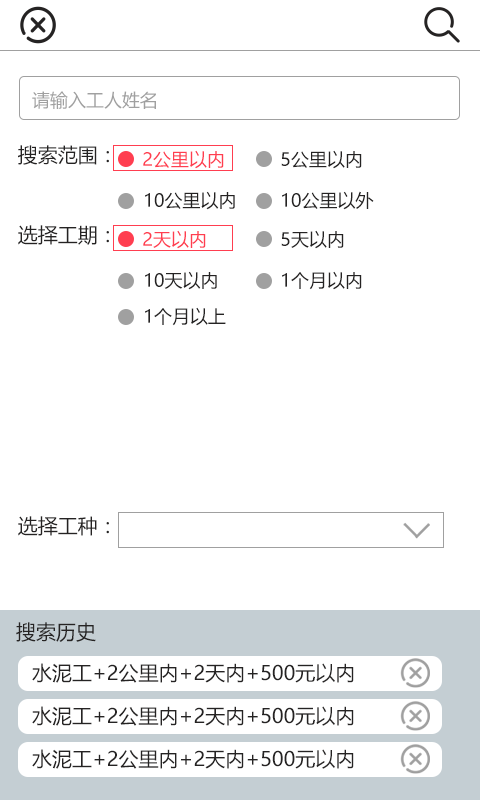
<style>
.page{position:relative;width:480px;height:800px;background:#ffffff}
.page>*{position:absolute;margin:0}
.t1{font:18px "MicrosoftYaHei";color:#a0a0a0}
.t2{font:20px "MicrosoftYaHei";color:#252323}
.t3{font:18px "MicrosoftYaHei";color:#ff3e50}
.t4{font:18px "MicrosoftYaHei";color:#252323}
</style>
<div class="page">
<p class="t1" style="left:32px;top:91px;width:124px;height:18px">请输入工人姓名</p>
<p class="t2" style="left:18px;top:145px;width:91px;height:20px">搜索范围：</p>
<p class="t3" style="left:143px;top:150px;width:81px;height:19px">2公里以内</p>
<p class="t4" style="left:281px;top:150px;width:81px;height:19px">5公里以内</p>
<p class="t4" style="left:145px;top:191px;width:90px;height:19px">10公里以内</p>
<p class="t4" style="left:282px;top:191px;width:92px;height:19px">10公里以外</p>
<p class="t2" style="left:18px;top:225px;width:91px;height:20px">选择工期：</p>
<p class="t3" style="left:143px;top:230px;width:63px;height:19px">2天以内</p>
<p class="t4" style="left:281px;top:230px;width:63px;height:19px">5天以内</p>
<p class="t4" style="left:145px;top:271px;width:72px;height:19px">10天以内</p>
<p class="t4" style="left:282px;top:271px;width:80px;height:19px">1个月以内</p>
<p class="t4" style="left:145px;top:307px;width:81px;height:19px">1个月以上</p>
<p class="t2" style="left:18px;top:516px;width:91px;height:20px">选择工种：</p>
<p class="t2" style="left:16px;top:622px;width:80px;height:20px">搜索历史</p>
<p class="t2" style="left:32px;top:663px;width:322px;height:20px">水泥工+2公里内+2天内+500元以内</p>
<p class="t2" style="left:32px;top:706px;width:322px;height:20px">水泥工+2公里内+2天内+500元以内</p>
<p class="t2" style="left:32px;top:749px;width:322px;height:20px">水泥工+2公里内+2天内+500元以内</p>
</div>
